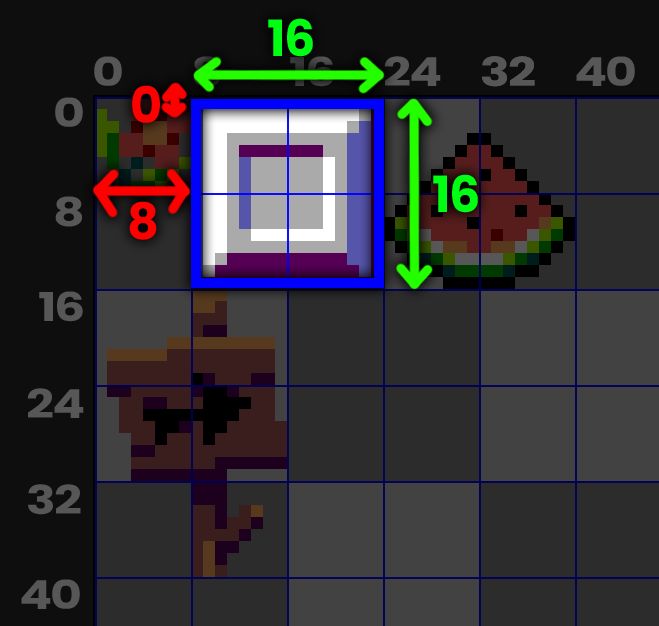
<style>
.page{position:relative;width:659px;height:626px;background:#2c2c2c}
.page>*{position:absolute;margin:0}
.t1{font:50.1px "Poppins-Bold";letter-spacing:-0.04em;color:#00ff12}
.t2{font:39.8px "Poppins-Bold";letter-spacing:-0.04em;color:#575757;scale:1.23 1}
.t3{font:39.8px "Poppins-Bold";letter-spacing:-0.04em;scale:1.23 1}
.t4{font:50.1px "Poppins-Bold";letter-spacing:-0.04em;color:#ff0000}
</style>
<div class="page">
<p class="t1" style="left:268px;top:18px;width:45px;height:39px">16</p>
<p class="t2" style="left:94px;top:56px;width:28px;height:30px">0</p>
<p class="t3" style="left:193px;top:56px;width:27px;height:31px">8</p>
<p class="t3" style="left:290px;top:56px;width:44px;height:31px">16</p>
<p class="t2" style="left:384px;top:56px;width:57px;height:30px">24</p>
<p class="t2" style="left:482px;top:56px;width:53px;height:31px">32</p>
<p class="t2" style="left:482px;top:56px;width:53px;height:31px">32</p>
<p class="t2" style="left:576px;top:56px;width:59px;height:30px">40</p>
<p class="t4" style="left:132px;top:85px;width:28px;height:38px">0</p>
<p class="t2" style="left:55px;top:97px;width:28px;height:30px">0</p>
<p class="t1" style="left:433px;top:174px;width:45px;height:39px">16</p>
<p class="t2" style="left:55px;top:196px;width:27px;height:31px">8</p>
<p class="t4" style="left:129px;top:201px;width:28px;height:39px">8</p>
<p class="t2" style="left:39px;top:291px;width:44px;height:31px">16</p>
<p class="t2" style="left:27px;top:388px;width:57px;height:30px">24</p>
<p class="t2" style="left:28px;top:484px;width:53px;height:31px">32</p>
<p class="t2" style="left:21px;top:579px;width:59px;height:30px">40</p>
</div>
